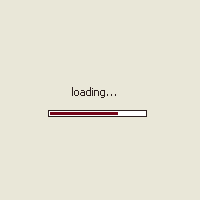
<style>
.page{position:relative;width:200px;height:200px;background:#e9e7d8}
.page>*{position:absolute;margin:0}
.t1{font:11px "Tahoma";color:#2c1f1e}
</style>
<div class="page">
<p class="t1" style="left:72px;top:87px;width:44px;height:11px">loading...</p>
</div>
